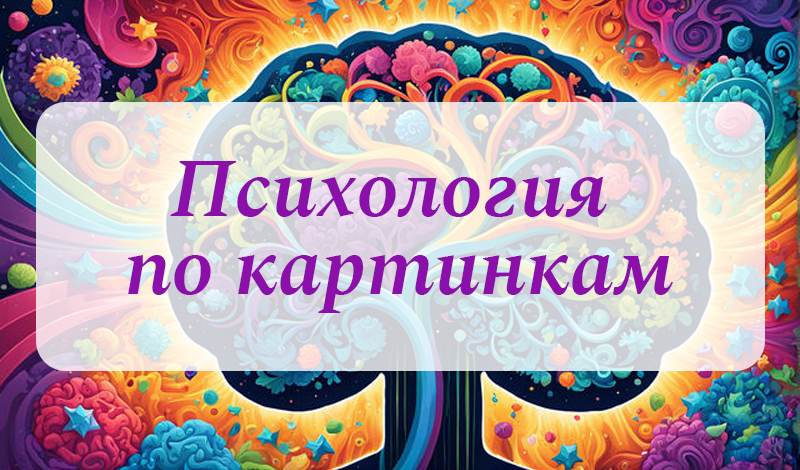
<style>
.page{position:relative;width:800px;height:470px}
.page>*{position:absolute;margin:0}
.t1{font:84.8px/78.6px "Spectral-SemiBoldItalic";color:#8b10aa}
</style>
<div class="page">
<p class="t1" style="left:128px;top:161px;width:545px;height:152px;text-align:center">Психология <br>по картинкам</p>
</div>
